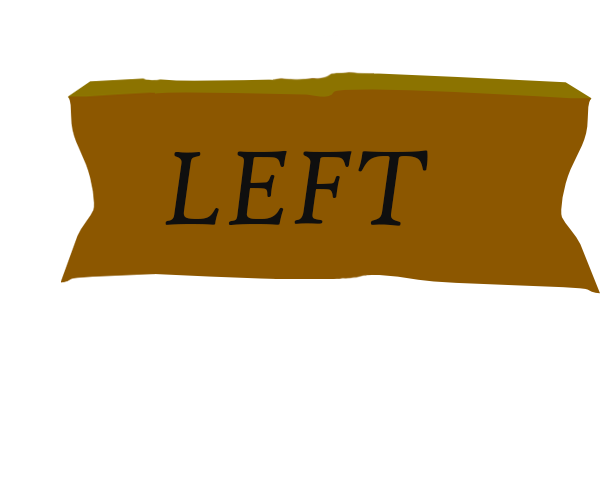
<style>
.page{position:relative;width:600px;height:492px;background:#ffffff}
.page>*{position:absolute;margin:0}
.t1{font:113.4px "HighTowerText-Italic";color:#0f0f0f}
</style>
<div class="page">
<p class="t1" style="left:165px;top:150px;width:263px;height:76px">LEFT</p>
</div>
